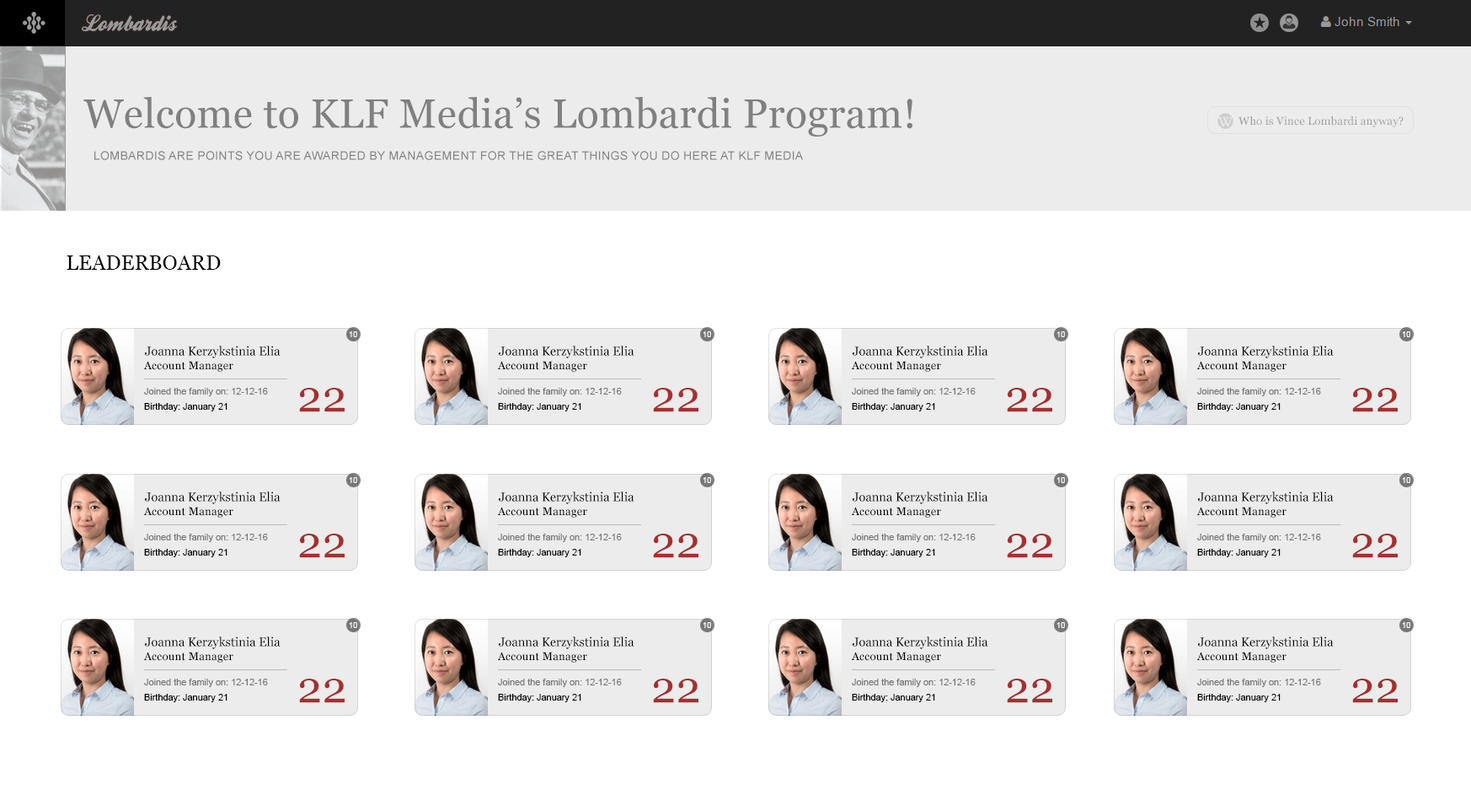
<style>
.page{position:relative;width:1471px;height:811px;background:#ffffff}
.page>*{position:absolute;margin:0}
.t1{font:23.4px "BallparkWeiner";color:#999999;scale:0.96 1}
.t2{font:40.6px "Georgia";letter-spacing:0.01em;color:#808080}
.t3{font:11.2px "Georgia";letter-spacing:0.01em;color:#9e9e9e}
.t4{font:11.9px "ArialMT";letter-spacing:0.01em;color:#808080;text-transform:uppercase}
.t5{font:20.2px "Georgia";letter-spacing:0.01em;color:#000000}
.t6{font:7.9px "ArialMT";letter-spacing:0.01em;color:#ffffff}
.t7{font:12.5px "Georgia";letter-spacing:0.01em;color:#000000;scale:0.97 1}
.t8{font:12.5px "Georgia";letter-spacing:0.01em;color:#ececec;scale:0.97 1}
.t9{font:11.2px "Georgia";letter-spacing:0.01em;color:#000000}
.t10{font:9px "ArialMT";letter-spacing:0.01em;color:#767676}
.t11{font:44px "Georgia";letter-spacing:0.01em;color:#a63030}
.t12{font:9px "ArialMT";letter-spacing:0.01em;color:#000000}
</style>
<div class="page">
<p class="t1" style="left:82px;top:14px;width:95px;height:17px">Lombardis</p>
<p class="t2" style="left:83px;top:97px;width:830px;height:39px">Welcome to KLF Media’s Lombardi Program!</p>
<p class="t3" style="left:1239px;top:116px;width:165px;height:11px">Who is Vince Lombardi anyway?</p>
<p class="t4" style="left:94px;top:151px;width:709px;height:9px">Lombardis are points you are awarded by management for the great things you do here at KLF Media</p>
<p class="t5" style="left:67px;top:255px;width:154px;height:15px">LEADERBOARD</p>
<p class="t6" style="left:349px;top:331px;width:8px;height:6px">10</p>
<p class="t6" style="left:703px;top:331px;width:8px;height:6px">10</p>
<p class="t6" style="left:1057px;top:331px;width:8px;height:6px">10</p>
<p class="t6" style="left:1402px;top:331px;width:8px;height:6px">10</p>
<p class="t7" style="left:145px;top:345px;width:141px;height:13px">Joanna Kerzykstinia Elia<span class="t8">s</span></p>
<p class="t7" style="left:499px;top:345px;width:141px;height:13px">Joanna Kerzykstinia Elia<span class="t8">s</span></p>
<p class="t7" style="left:853px;top:345px;width:140px;height:13px">Joanna Kerzykstinia Elia<span class="t8">s</span></p>
<p class="t7" style="left:1198px;top:345px;width:141px;height:13px">Joanna Kerzykstinia Elia<span class="t8">s</span></p>
<p class="t9" style="left:143px;top:361px;width:90px;height:11px">Account Manager</p>
<p class="t9" style="left:497px;top:361px;width:90px;height:11px">Account Manager</p>
<p class="t9" style="left:851px;top:361px;width:90px;height:11px">Account Manager</p>
<p class="t9" style="left:1196px;top:361px;width:91px;height:11px">Account Manager</p>
<p class="t10" style="left:144px;top:388px;width:124px;height:8px">Joined the family on: 12-12-16</p>
<p class="t11" style="left:299px;top:388px;width:46px;height:24px">22</p>
<p class="t10" style="left:498px;top:388px;width:124px;height:8px">Joined the family on: 12-12-16</p>
<p class="t11" style="left:653px;top:388px;width:45px;height:24px">22</p>
<p class="t10" style="left:852px;top:388px;width:124px;height:8px">Joined the family on: 12-12-16</p>
<p class="t11" style="left:1007px;top:388px;width:45px;height:24px">22</p>
<p class="t10" style="left:1197px;top:388px;width:124px;height:8px">Joined the family on: 12-12-16</p>
<p class="t11" style="left:1352px;top:388px;width:46px;height:24px">22</p>
<p class="t12" style="left:144px;top:403px;width:83px;height:8px">Birthday: January 21</p>
<p class="t12" style="left:498px;top:403px;width:83px;height:8px">Birthday: January 21</p>
<p class="t12" style="left:852px;top:403px;width:83px;height:8px">Birthday: January 21</p>
<p class="t12" style="left:1197px;top:403px;width:84px;height:8px">Birthday: January 21</p>
<p class="t6" style="left:349px;top:477px;width:8px;height:6px">10</p>
<p class="t6" style="left:703px;top:477px;width:8px;height:6px">10</p>
<p class="t6" style="left:1057px;top:477px;width:8px;height:6px">10</p>
<p class="t6" style="left:1402px;top:477px;width:8px;height:6px">10</p>
<p class="t7" style="left:145px;top:491px;width:141px;height:13px">Joanna Kerzykstinia Elia<span class="t8">s</span></p>
<p class="t7" style="left:499px;top:491px;width:141px;height:13px">Joanna Kerzykstinia Elia<span class="t8">s</span></p>
<p class="t7" style="left:853px;top:491px;width:140px;height:13px">Joanna Kerzykstinia Elia<span class="t8">s</span></p>
<p class="t7" style="left:1198px;top:491px;width:141px;height:13px">Joanna Kerzykstinia Elia<span class="t8">s</span></p>
<p class="t9" style="left:143px;top:506px;width:90px;height:11px">Account Manager</p>
<p class="t9" style="left:497px;top:506px;width:90px;height:11px">Account Manager</p>
<p class="t9" style="left:851px;top:506px;width:90px;height:11px">Account Manager</p>
<p class="t9" style="left:1196px;top:506px;width:91px;height:11px">Account Manager</p>
<p class="t10" style="left:144px;top:533px;width:124px;height:9px">Joined the family on: 12-12-16</p>
<p class="t11" style="left:299px;top:533px;width:46px;height:25px">22</p>
<p class="t10" style="left:498px;top:533px;width:124px;height:9px">Joined the family on: 12-12-16</p>
<p class="t11" style="left:653px;top:533px;width:45px;height:25px">22</p>
<p class="t10" style="left:852px;top:533px;width:124px;height:9px">Joined the family on: 12-12-16</p>
<p class="t11" style="left:1007px;top:533px;width:45px;height:25px">22</p>
<p class="t10" style="left:1197px;top:533px;width:124px;height:9px">Joined the family on: 12-12-16</p>
<p class="t11" style="left:1352px;top:533px;width:46px;height:25px">22</p>
<p class="t12" style="left:144px;top:549px;width:83px;height:8px">Birthday: January 21</p>
<p class="t12" style="left:498px;top:549px;width:83px;height:8px">Birthday: January 21</p>
<p class="t12" style="left:852px;top:549px;width:83px;height:8px">Birthday: January 21</p>
<p class="t12" style="left:1197px;top:549px;width:84px;height:8px">Birthday: January 21</p>
<p class="t6" style="left:349px;top:622px;width:8px;height:6px">10</p>
<p class="t6" style="left:703px;top:622px;width:8px;height:6px">10</p>
<p class="t6" style="left:1057px;top:622px;width:8px;height:6px">10</p>
<p class="t6" style="left:1402px;top:622px;width:8px;height:6px">10</p>
<p class="t7" style="left:145px;top:636px;width:141px;height:13px">Joanna Kerzykstinia Elia<span class="t8">s</span></p>
<p class="t7" style="left:499px;top:636px;width:141px;height:13px">Joanna Kerzykstinia Elia<span class="t8">s</span></p>
<p class="t7" style="left:853px;top:636px;width:140px;height:13px">Joanna Kerzykstinia Elia<span class="t8">s</span></p>
<p class="t7" style="left:1198px;top:636px;width:141px;height:13px">Joanna Kerzykstinia Elia<span class="t8">s</span></p>
<p class="t9" style="left:143px;top:651px;width:90px;height:11px">Account Manager</p>
<p class="t9" style="left:497px;top:651px;width:90px;height:11px">Account Manager</p>
<p class="t9" style="left:851px;top:651px;width:90px;height:11px">Account Manager</p>
<p class="t9" style="left:1196px;top:651px;width:91px;height:11px">Account Manager</p>
<p class="t10" style="left:144px;top:678px;width:124px;height:9px">Joined the family on: 12-12-16</p>
<p class="t11" style="left:299px;top:678px;width:46px;height:25px">22</p>
<p class="t10" style="left:498px;top:678px;width:124px;height:9px">Joined the family on: 12-12-16</p>
<p class="t11" style="left:653px;top:678px;width:45px;height:25px">22</p>
<p class="t10" style="left:852px;top:678px;width:124px;height:9px">Joined the family on: 12-12-16</p>
<p class="t11" style="left:1007px;top:678px;width:45px;height:25px">22</p>
<p class="t10" style="left:1197px;top:678px;width:124px;height:9px">Joined the family on: 12-12-16</p>
<p class="t11" style="left:1352px;top:678px;width:46px;height:25px">22</p>
<p class="t12" style="left:144px;top:693px;width:83px;height:9px">Birthday: January 21</p>
<p class="t12" style="left:498px;top:693px;width:83px;height:9px">Birthday: January 21</p>
<p class="t12" style="left:852px;top:693px;width:83px;height:9px">Birthday: January 21</p>
<p class="t12" style="left:1197px;top:693px;width:84px;height:9px">Birthday: January 21</p>
</div>
